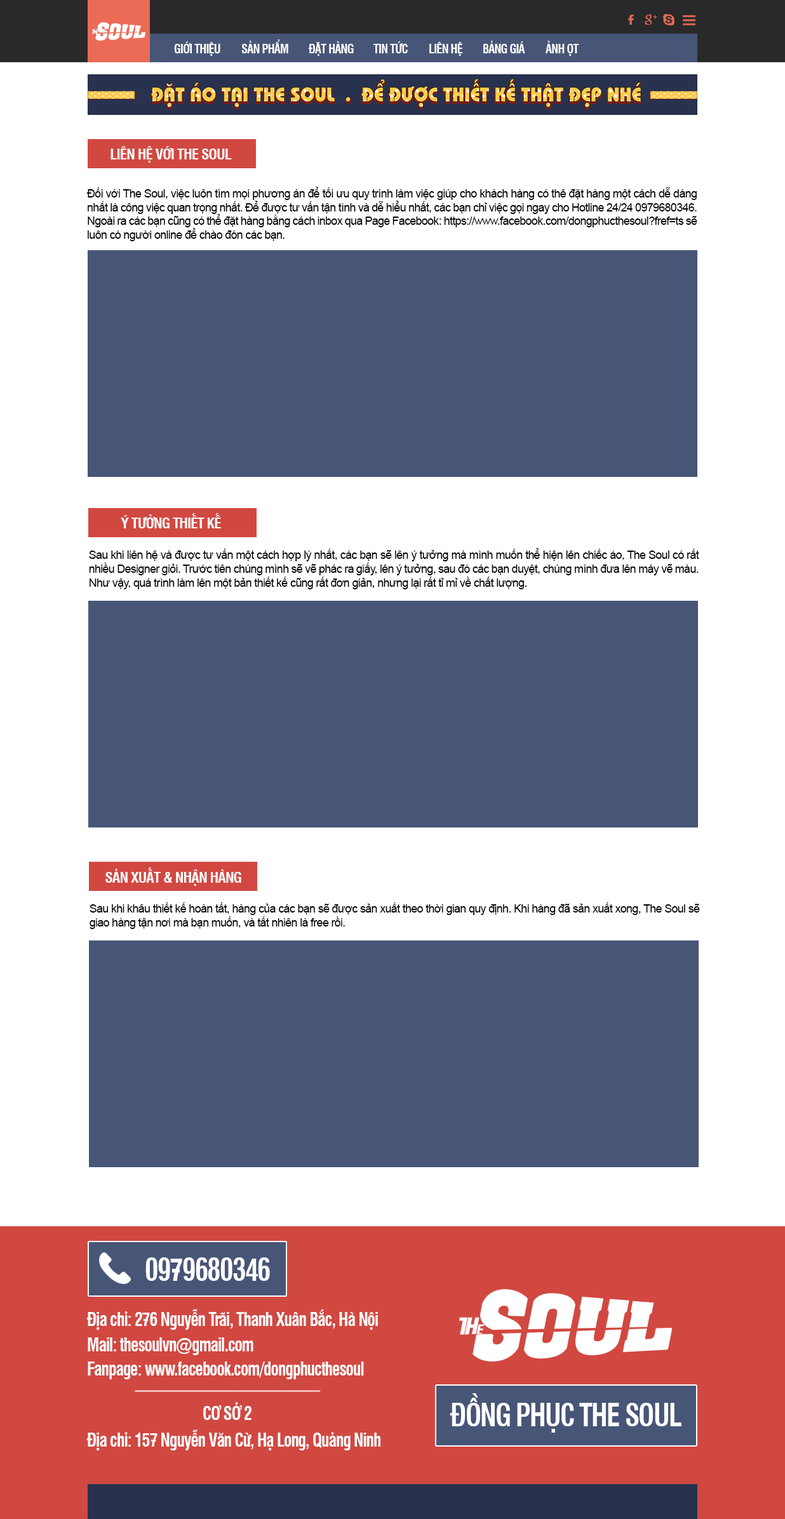
<style>
.page{position:relative;width:785px;height:1519px;background:#475577}
.page>*{position:absolute;margin:0}
.t1{font:12.5px "UVNHongHaHepBold";letter-spacing:-0.04em;color:#ffffff;scale:0.92 1}
.t2{font:14.7px "UVNHongHaHepBold";letter-spacing:-0.04em;color:#ffffff}
.t3{font:11.4px "ArialMT";letter-spacing:-0.04em;color:#000000}
.t4{font:30.2px "UVNHongHaHepBold";letter-spacing:-0.04em;color:#ffffff;scale:0.9 1}
.t5{font:18.3px "UVNHongHaHepBold";letter-spacing:-0.04em;color:#ffffff;scale:0.89 1}
</style>
<div class="page">
<p class="t1" style="left:174px;top:41px;width:46px;height:15px">GIỚI THIỆU</p>
<p class="t1" style="left:241px;top:39px;width:47px;height:14px">SẢN PHẨM</p>
<p class="t1" style="left:308px;top:41px;width:46px;height:15px">ĐẶT HÀNG</p>
<p class="t1" style="left:373px;top:41px;width:35px;height:12px">TIN TỨC</p>
<p class="t1" style="left:429px;top:42px;width:34px;height:14px">LIÊN HỆ</p>
<p class="t1" style="left:483px;top:41px;width:42px;height:12px">BẢNG GIÁ</p>
<p class="t1" style="left:546px;top:41px;width:33px;height:15px">ẢNH ỌT</p>
<p class="t2" style="left:111px;top:146px;width:121px;height:17px">LIÊN HỆ VỚI THE SOUL</p>
<p class="t3" style="left:86px;top:187px;width:611px;height:54px;text-align:justify">Đối với The Soul, việc luôn tìm mọi phương án để tối ưu quy trình làm việc giúp cho khách hàng có thê đặt hàng một cách dễ dàng nhất là công việc quan trọng nhất. Để được tư vấn tận tình và dễ hiểu nhất, các bạn chỉ việc gọi ngay cho Hotline 24/24 0979680346. Ngoài ra các bạn cũng có thể đặt hàng bằng cách inbox qua Page Facebook: https://www.facebook.com/dongphucthesoul?fref=ts sẽ luôn có người online để chào đón các bạn.</p>
<p class="t2" style="left:121px;top:513px;width:100px;height:15px">Ý TƯỞNG THIẾT KẾ</p>
<p class="t3" style="left:89px;top:548px;width:610px;height:41px;text-align:justify">Sau khi liên hệ và được tư vấn một cách hợp lý nhất, các bạn sẽ lên ý tưởng mà mình muốn thể hiện lên chiếc áo, The Soul có rất nhiều Designer giỏi. Trước tiên chúng mình sẽ vẽ phác ra giấy, lên ý tưởng, sau đó các bạn duyệt, chúng mình đưa lên máy vẽ màu. Như vậy, quá trình làm lên một bản thiết kế cũng rất đơn giản, nhưng lại rất tỉ mỉ về chất lượng.</p>
<p class="t2" style="left:105px;top:868px;width:136px;height:18px">SẢN XUẤT &amp; NHẬN HÀNG</p>
<p class="t3" style="left:90px;top:902px;width:610px;height:27px;text-align:justify">Sau khi khâu thiết kế hoàn tất, hàng của các bạn sẽ được sản xuất theo thời gian quy định. Khi hàng đã sản xuất xong, The Soul sẽ giao hàng tận nơi mà bạn muốn, và tất nhiên là free rồi.</p>
<p class="t4" style="left:145px;top:1257px;width:125px;height:24px">0979680346</p>
<p class="t5" style="left:86px;top:1309px;width:292px;height:21px">Địa chỉ: 276 Nguyễn Trãi, Thanh Xuân Bắc, Hà Nội</p>
<p class="t5" style="left:88px;top:1337px;width:165px;height:18px">Mail: thesoulvn@gmail.com</p>
<p class="t5" style="left:88px;top:1362px;width:276px;height:17px">Fanpage: www.facebook.com/dongphucthesoul</p>
<p class="t4" style="left:450px;top:1393px;width:231px;height:40px">ĐỒNG PHỤC THE SOUL</p>
<p class="t5" style="left:203px;top:1402px;width:48px;height:18px">CƠ SỞ 2</p>
<p class="t5" style="left:86px;top:1430px;width:294px;height:21px">Địa chỉ: 157 Nguyễn Văn Cừ, Hạ Long, Quảng Ninh</p>
</div>
